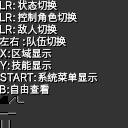
<style>
.page{position:relative;width:128px;height:128px;background:#333333}
.page>*{position:absolute;margin:0}
.t1{font:10px/12px "SourceHanSansSC-Regular";color:#e9e9e9}
.t2{font:10px "SourceHanSansSC-Regular";color:#e6e6e6}
.t3{font:10px/12px "SourceHanSansSC-Regular";color:#e6e6e6}
.t4{font:10px "SourceHanSansSC-Regular";color:#e8e8e8}
.t5{font:10px "SourceHanSansSC-Regular";color:#ffffff}
</style>
<div class="page">
<p class="t1" style="left:17px;top:0px;width:60px;height:34px">状态切换<br>控制角色切换<br>敌人切换</p>
<p class="t2" style="left:27px;top:36px;width:39px;height:11px">队伍切换</p>
<p class="t3" style="left:11px;top:48px;width:41px;height:22px">区域显示<br>技能显示</p>
<p class="t4" style="left:38px;top:72px;width:60px;height:10px">系统菜单显示</p>
<p class="t5" style="left:11px;top:84px;width:39px;height:10px">自由查看</p>
</div>
